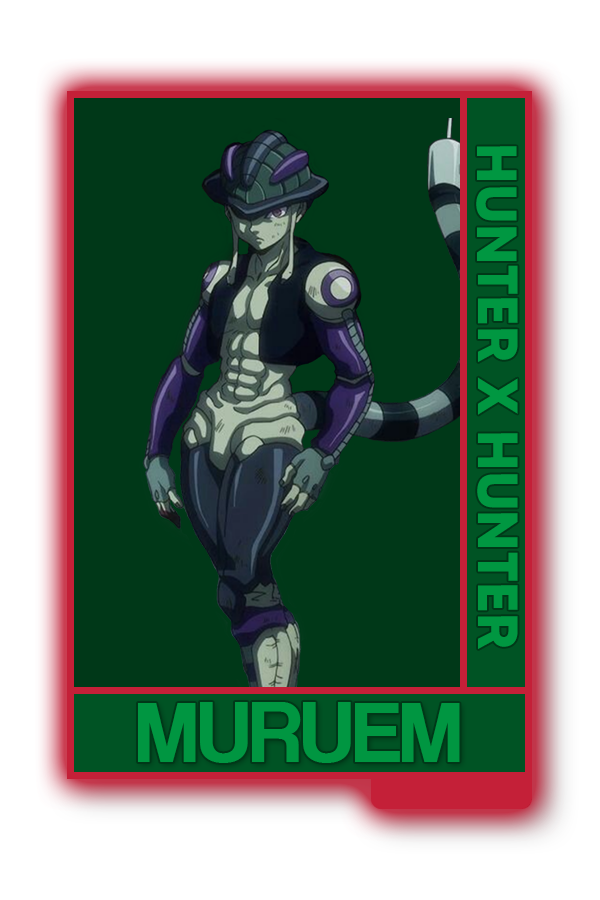
<style>
.page{position:relative;width:600px;height:900px;background:#003818}
.page>*{position:absolute;margin:0}
.t1{font:56.5px "MADETOMMY-Bold";color:#009741}
.t2{font:88.8px "CoolveticaRg-Regular";color:#009641}
</style>
<div class="page">
<p class="t1" style="left:476px;top:146px;width:42px;height:503px;rotate:90deg">HUNTER X HUNTER</p>
<p class="t2" style="left:138px;top:702px;width:322px;height:61px">MURUEM</p>
</div>
